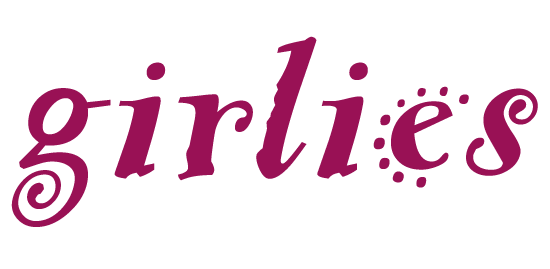
<style>
.page{position:relative;width:550px;height:269px;background:#ffffff}
.page>*{position:absolute;margin:0}
.t1{font:193.3px "ARHERMANN";color:#991155;font-style:italic}
</style>
<div class="page">
<p class="t1" style="left:11px;top:36px;width:527px;height:191px">girlies</p>
</div>
